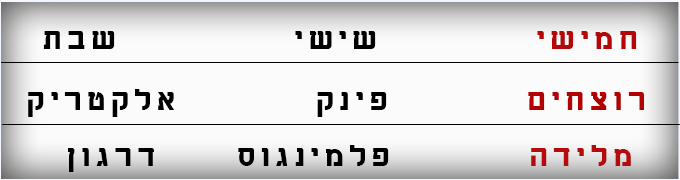
<style>
.page{position:relative;width:680px;height:180px;background:#fbfbfb}
.page>*{position:absolute;margin:0}
.t1{font:31.6px "AharoniCLM-Bold";letter-spacing:0.195em;color:#000000}
.t2{font:31.6px "AharoniCLM-Bold";letter-spacing:0.195em;color:#b30708}
.t3{font:31.6px "AharoniCLM-Bold";letter-spacing:0.195em;color:#b30101}
.t4{font:31.6px "AharoniCLM-Bold";letter-spacing:0.195em;color:#b40c0e}
</style>
<div class="page">
<p class="t1" style="left:43px;top:31px;width:594px;height:18px"><span class="t2">חמישי        </span>שישי         שבת</p>
<p class="t1" style="left:28px;top:89px;width:616px;height:28px"><span class="t3">רוצחים       </span>פינק       אלקטריק</p>
<p class="t1" style="left:68px;top:145px;width:563px;height:27px"><span class="t4">מלידה       </span>פלמינגוס    דרגון</p>
</div>
